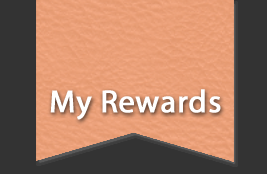
<style>
.page{position:relative;width:267px;height:174px;background:#333333}
.page>*{position:absolute;margin:0}
.t1{font:32px "MyriadPro-Regular";letter-spacing:0.01em;color:#ffffff;font-weight:bold}
</style>
<div class="page">
<p class="t1" style="left:50px;top:89px;width:171px;height:31px">My Rewards</p>
</div>
